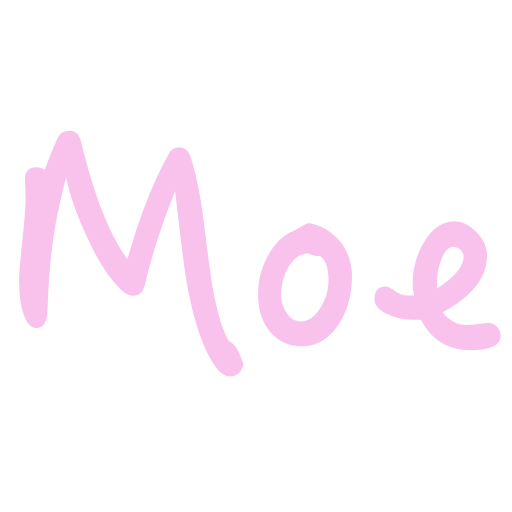
<style>
.page{position:relative;width:512px;height:512px;background:#ffffff}
.page>*{position:absolute;margin:0}
.t1{font:296px "HanziPenSC-W5";color:#f8c2ed}
</style>
<div class="page">
<p class="t1" style="left:19px;top:130px;width:482px;height:247px">Moe</p>
</div>
